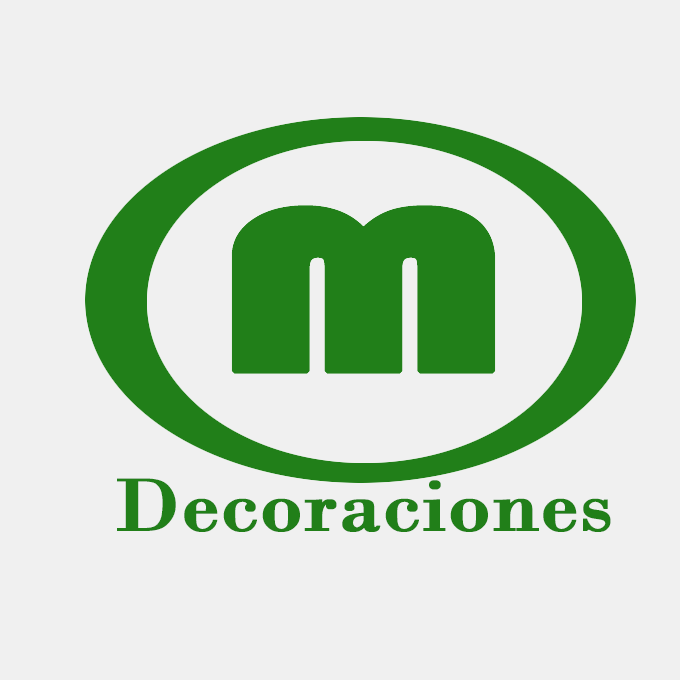
<style>
.page{position:relative;width:680px;height:680px;background:#f0f0f0}
.page>*{position:absolute;margin:0}
.t1{font:78.8px "BodoniMT";color:#217f19;font-weight:bold;scale:1.09 1}
</style>
<div class="page">
<p class="t1" style="left:117px;top:478px;width:494px;height:54px">Decoraciones</p>
</div>
